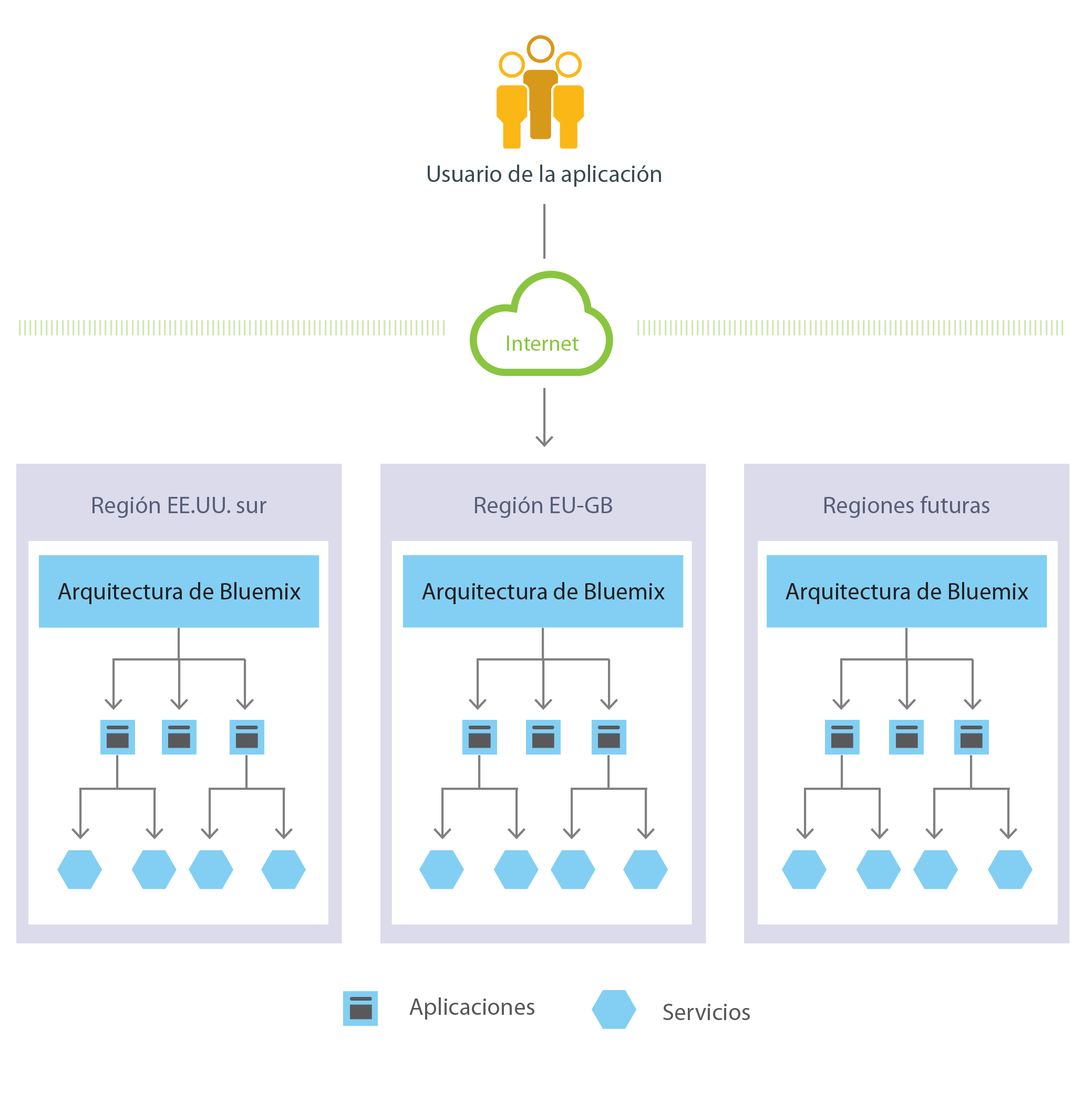
<style>
.page{position:relative;width:1084px;height:1100px;background:#ffffff}
.page>*{position:absolute;margin:0}
.t1{font:24.1px "MyriadPro-Regular";color:#3b4b54}
.t2{font:21.9px "MyriadPro-Regular";color:#8ac540}
.t3{font:24.1px "MyriadPro-Regular";color:#58607a}
.t4{font:24.1px "MyriadPro-Regular";color:#231f20}
.t5{font:24.1px "MyriadPro-Regular";color:#59595c}
</style>
<div class="page">
<p class="t1" style="left:428px;top:165px;width:233px;height:22px">Usuario de la aplicación</p>
<p class="t2" style="left:507px;top:335px;width:72px;height:16px">Internet</p>
<p class="t3" style="left:93px;top:496px;width:173px;height:22px">Región EE.UU. sur</p>
<p class="t3" style="left:475px;top:496px;width:137px;height:22px">Región EU-GB</p>
<p class="t3" style="left:825px;top:496px;width:165px;height:22px">Regiones futuras</p>
<p class="t4" style="left:58px;top:582px;width:243px;height:22px">Arquitectura de Bluemix</p>
<p class="t4" style="left:422px;top:582px;width:243px;height:22px">Arquitectura de Bluemix</p>
<p class="t4" style="left:786px;top:582px;width:243px;height:22px">Arquitectura de Bluemix</p>
<p class="t5" style="left:409px;top:997px;width:126px;height:22px">Aplicaciones</p>
<p class="t5" style="left:663px;top:1003px;width:87px;height:17px">Servicios</p>
</div>
